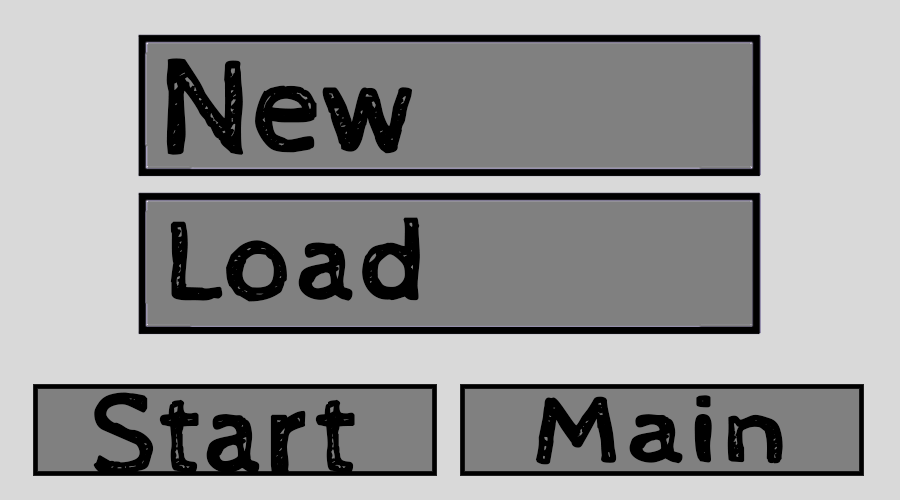
<style>
.page{position:relative;width:900px;height:500px;background:#d9d9d9}
.page>*{position:absolute;margin:0}
.t1{font:135.7px "CabinSketch-Regular";color:#000000;font-weight:bold}
.t2{font:113.7px "CabinSketch-Regular";color:#000000;font-weight:bold;scale:1.05 1}
.t3{font:116.6px "CabinSketch-Regular";color:#000000;font-weight:bold}
.t4{font:95.2px "CabinSketch-Regular";color:#000000;font-weight:bold;scale:1.23 1}
</style>
<div class="page">
<p class="t1" style="left:166px;top:58px;width:246px;height:97px">New</p>
<p class="t2" style="left:170px;top:217px;width:250px;height:85px">Load</p>
<p class="t3" style="left:93px;top:392px;width:262px;height:83px">Start</p>
<p class="t4" style="left:535px;top:395px;width:248px;height:70px">Main</p>
</div>
